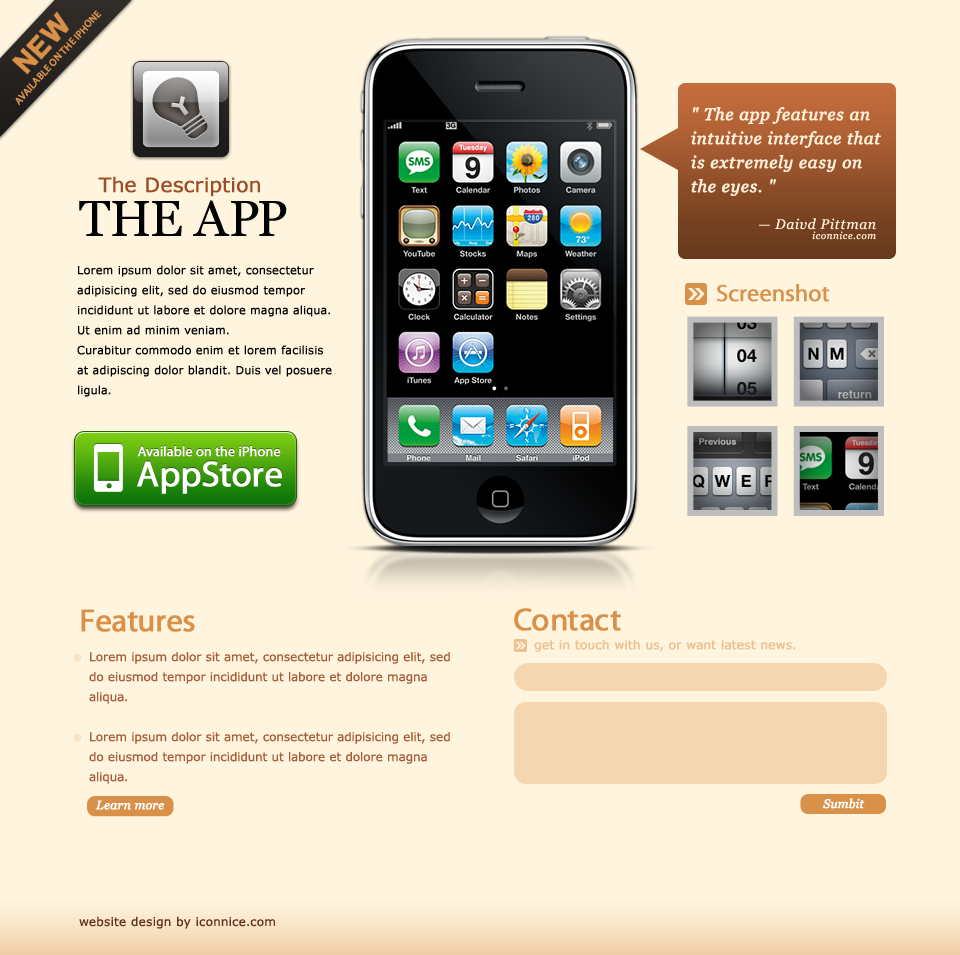
<style>
.page{position:relative;width:960px;height:955px;background:#fff4de}
.page>*{position:absolute;margin:0}
.t1{font:28px "Arial-BoldMT";letter-spacing:0.1em;color:#d9914a;font-weight:bold}
.t2{font:17px/24px "Georgia-Italic";letter-spacing:0.025em;color:#ffeed8;font-weight:bold}
.t3{font:20px "Verdana";color:#9c4d23;font-weight:bold}
.t4{font:50.5px "Georgia";letter-spacing:-0.005em;color:#010101;text-transform:uppercase}
.t5{font:14px/10px "Georgia-Italic";letter-spacing:0.05em;color:#ffeed8}
.t6{font:10px/10px "Georgia-Italic";letter-spacing:0.05em;color:#ffeed8}
.t7{font:11px/20px "Verdana";color:#010101;font-weight:bold}
.t8{font:23.8px "MyriadPro-Regular";color:#d9914a;font-weight:bold}
.t9{font:14px "MyriadPro-Regular";letter-spacing:-0.005em;color:#ffffff;font-weight:bold}
.t10{font:36.5px "MyriadPro-Regular";letter-spacing:-0.005em;color:#ffffff;font-weight:bold}
.t11{font:32px "MyriadPro-Regular";color:#d9914a;font-weight:bold}
.t12{font:12px "Verdana";color:#e6be8c;font-weight:bold}
.t13{font:12px/20px "Verdana";color:#a65d39}
.t14{font:12.2px "Georgia-Italic";color:#ffffff;font-weight:bold}
.t15{font:12.4px "Georgia-Italic";color:#ffffff;font-weight:bold}
.t16{font:12px "Verdana";letter-spacing:0.025em;color:#65341c}
</style>
<div class="page">
<p class="t1" style="left:11px;top:11px;width:58px;height:64px;rotate:-48deg">NEW</p>
<p class="t2" style="left:691px;top:106px;width:190px;height:90px">" The app features an intuitive interface that is extremely easy on the eyes. "</p>
<p class="t3" style="left:98px;top:176px;width:162px;height:21px">The Description</p>
<p class="t4" style="left:79px;top:200px;width:208px;height:36px">the App</p>
<p class="t5" style="left:759px;top:218px;width:117px;height:22px;text-align:right">— Daivd Pittman<br>        <span class="t6">iconnice.com</span></p>
<p class="t7" style="left:77px;top:265px;width:255px;height:132px">Lorem ipsum dolor sit amet, consectetur adipisicing elit, sed do eiusmod tempor incididunt ut labore et dolore magna aliqua. Ut enim ad minim veniam.<br>Curabitur commodo enim et lorem facilisis at adipiscing dolor blandit. Duis vel posuere ligula.</p>
<p class="t8" style="left:717px;top:284px;width:113px;height:18px">Screenshot</p>
<p class="t9" style="left:137px;top:446px;width:144px;height:11px">Available on the iPhone</p>
<p class="t10" style="left:137px;top:461px;width:145px;height:33px">AppStore</p>
<p class="t11" style="left:81px;top:609px;width:114px;height:23px">Features</p>
<p class="t11" style="left:514px;top:608px;width:107px;height:23px">Contact</p>
<p class="t12" style="left:534px;top:639px;width:262px;height:13px;opacity:0.5">get in touch with us, or want latest news.</p>
<p class="t13" style="left:89px;top:652px;width:361px;height:132px">Lorem ipsum dolor sit amet, consectetur adipisicing elit, sed do eiusmod tempor incididunt ut labore et dolore magna aliqua. <br><br>Lorem ipsum dolor sit amet, consectetur adipisicing elit, sed do eiusmod tempor incididunt ut labore et dolore magna aliqua.</p>
<p class="t14" style="left:823px;top:798px;width:42px;height:11px">Sumbit</p>
<p class="t15" style="left:95px;top:800px;width:69px;height:10px">Learn more</p>
<p class="t16" style="left:79px;top:916px;width:196px;height:13px">website design by iconnice.com</p>
</div>
